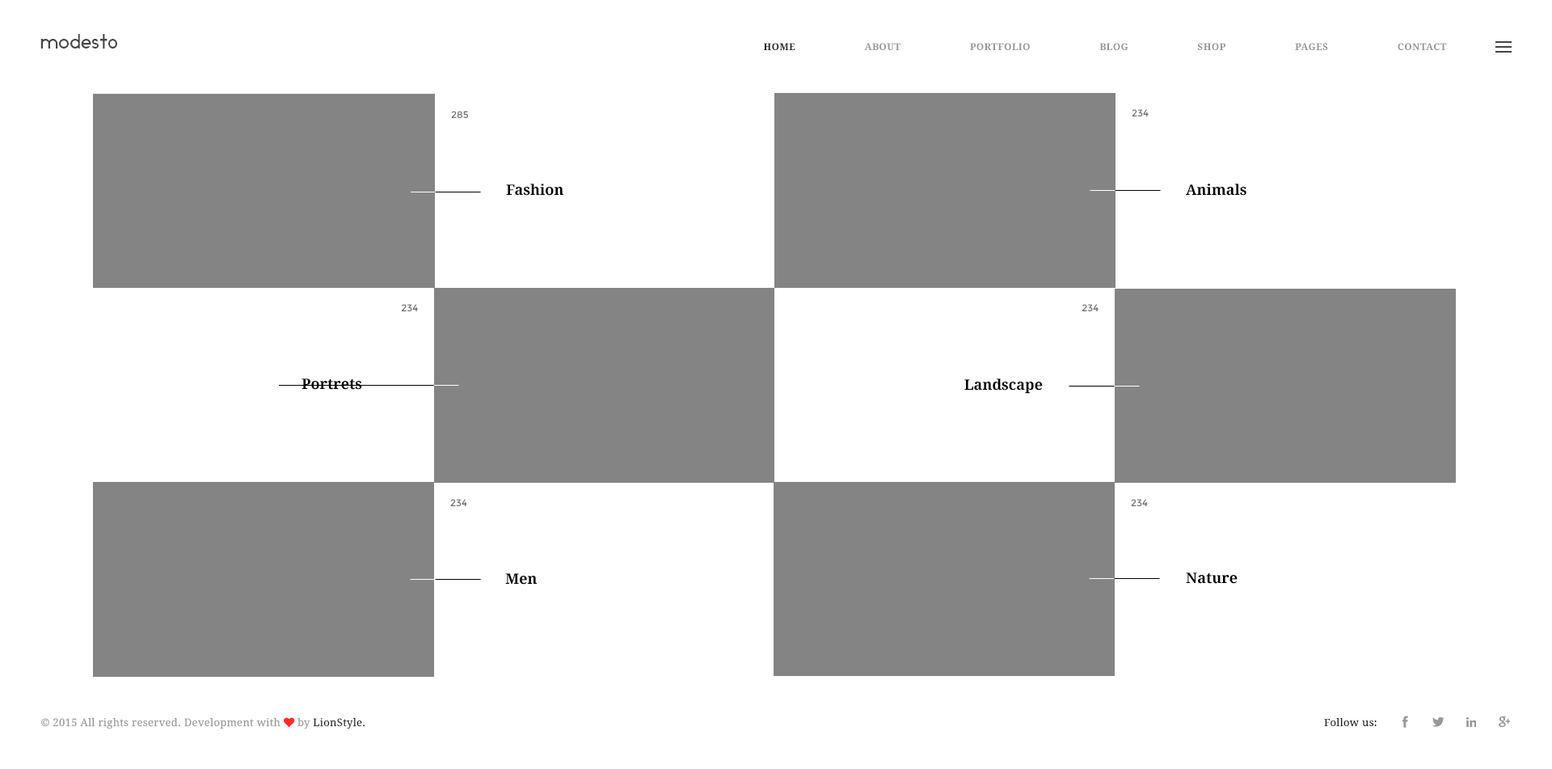
<style>
.page{position:relative;width:1552px;height:769px;background:#ffffff}
.page>*{position:absolute;margin:0}
.t1{font:19.4px "Ikaros";letter-spacing:0.025em;color:#444444}
.t2{font:9.7px "DroidSerif-Bold";letter-spacing:0.025em;color:#989898;text-transform:uppercase}
.t3{font:9.7px "DroidSerif-Bold";letter-spacing:0.025em;color:#222222;text-transform:uppercase}
.t4{font:9.7px "Montserrat-Regular";color:#737373;text-transform:uppercase}
.t5{font:14.5px "DroidSerif-Bold";color:#000000}
.t6{font:14.5px "DroidSerif-Bold";color:#000000;text-transform:uppercase}
.t7{font:10.5px "DroidSerif";letter-spacing:0.025em;color:#989898}
.t8{font:10.5px "FontAwesome";letter-spacing:0.025em;color:#fe2b2b}
.t9{font:10.5px "DroidSerif";letter-spacing:0.025em;color:#222222}
</style>
<div class="page">
<p class="t1" style="left:40px;top:34px;width:77px;height:14px">modesto</p>
<p class="t2" style="left:764px;top:43px;width:683px;height:7px"><span class="t3">home                         </span>about                         portfolio                         Blog                         shop                         pages                         contact</p>
<p class="t4" style="left:451px;top:111px;width:17px;height:7px">285</p>
<p class="t4" style="left:1131px;top:109px;width:17px;height:7px">234</p>
<p class="t5" style="left:506px;top:183px;width:57px;height:13px">Fashion</p>
<p class="t5" style="left:1186px;top:183px;width:60px;height:13px"><span class="t6">a</span>nimals</p>
<p class="t4" style="left:401px;top:304px;width:17px;height:7px">234</p>
<p class="t4" style="left:1081px;top:304px;width:17px;height:7px">234</p>
<p class="t5" style="left:301px;top:378px;width:61px;height:12px"><span class="t6">P</span>ortrets</p>
<p class="t5" style="left:964px;top:378px;width:78px;height:16px"><span class="t6">l</span>andscape</p>
<p class="t4" style="left:450px;top:499px;width:17px;height:7px">234</p>
<p class="t4" style="left:1131px;top:499px;width:17px;height:7px">234</p>
<p class="t5" style="left:505px;top:573px;width:32px;height:11px"><span class="t6">m</span>en</p>
<p class="t5" style="left:1186px;top:572px;width:51px;height:11px"><span class="t6">n</span>ature</p>
<p class="t7" style="left:41px;top:717px;width:324px;height:12px">© 2015 All rights reserved. Development with <span class="t8">♥ </span>by <span class="t9">LionStyle.</span></p>
<p class="t9" style="left:1324px;top:718px;width:52px;height:8px">Follow us:</p>
</div>
